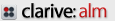
<style>
.page{position:relative;width:115px;height:21px;background:#eaeaea}
.page>*{position:absolute;margin:0}
.t1{font:20px "MyriadPro-Regular";letter-spacing:-0.05em;color:#000000;font-weight:bold}
.t2{font:20px "MyriadPro-Regular";letter-spacing:-0.05em;color:#000000}
.t3{font:20px "MyriadPro-Regular";letter-spacing:-0.05em;color:#ca1919}
</style>
<div class="page">
<p class="t1" style="left:22px;top:3px;width:85px;height:15px">clarive<span class="t2">: </span><span class="t3">alm</span></p>
</div>
